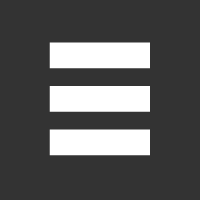
<style>
.page{position:relative;width:200px;height:200px;background:#333333}
.page>*{position:absolute;margin:0}
.t1{font:199.9px "Arial-BoldMT";color:#ffffff}
</style>
<div class="page">
<p class="t1" style="left:49px;top:42px;width:101px;height:114px">≡</p>
</div>
